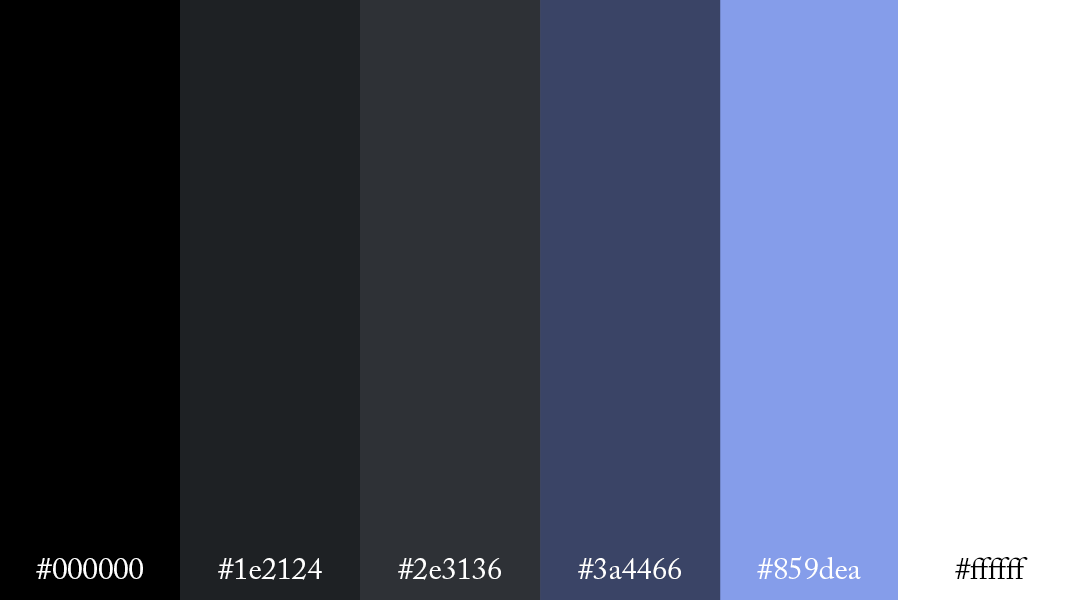
<style>
.page{position:relative;width:1082px;height:600px}
.page>*{position:absolute;margin:0}
.t1{font:30.5px "ACaslonPro-Regular";color:#ffffff}
.t2{font:30.5px "ACaslonPro-Regular";color:#010101}
</style>
<div class="page">
<p class="t1" style="left:36px;top:558px;width:107px;height:21px">#000000</p>
<p class="t1" style="left:218px;top:558px;width:104px;height:22px">#1e2124</p>
<p class="t1" style="left:398px;top:558px;width:103px;height:22px">#2e3136</p>
<p class="t1" style="left:578px;top:558px;width:103px;height:21px">#3a4466</p>
<p class="t1" style="left:757px;top:556px;width:104px;height:23px">#859dea</p>
<p class="t2" style="left:955px;top:557px;width:73px;height:22px">#ffffff</p>
</div>
